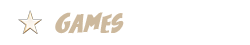
<style>
.page{position:relative;width:250px;height:45px;background:#ffffff}
.page>*{position:absolute;margin:0}
.t1{font:30px "HoustonComicsPersonalUse";color:#cdb99d}
</style>
<div class="page">
<p class="t1" style="left:55px;top:12px;width:69px;height:22px">GAMES</p>
</div>
